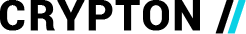
<style>
.page{position:relative;width:246px;height:34px;background:#ffffff}
.page>*{position:absolute;margin:0}
.t1{font:72px "Roboto-Bold";letter-spacing:0.025em;color:#000000;font-weight:bold}
.t2{font:72px "Roboto-Bold";letter-spacing:-0.15em;color:#000000;font-weight:bold}
.t3{font:72px "Roboto-Bold";letter-spacing:-0.15em;color:#0ad1e5;font-weight:bold}
</style>
<div class="page">
<p class="t1" style="left:0px;top:0px;width:246px;height:34px">CRYPTON <span class="t2">/</span><span class="t3">/</span></p>
</div>
